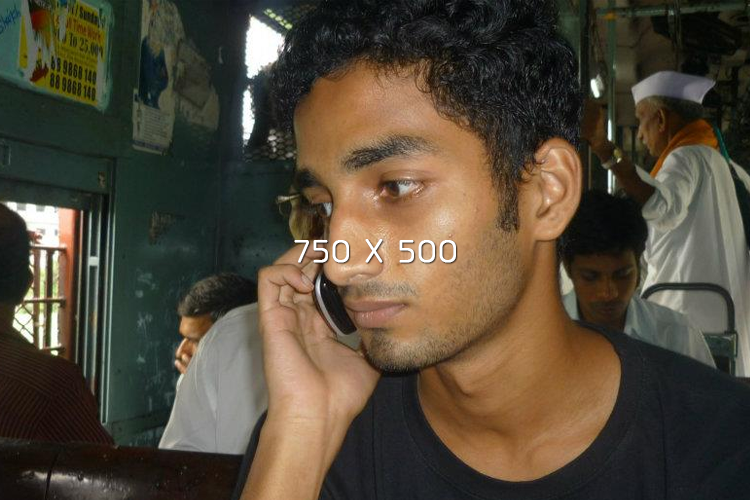
<style>
.page{position:relative;width:750px;height:500px}
.page>*{position:absolute;margin:0}
.t1{font:33.3px "Planer";letter-spacing:0.04em;color:#ffffff;font-weight:bold}
</style>
<div class="page">
<p class="t1" style="left:294px;top:239px;width:162px;height:24px">750 X 500</p>
</div>
